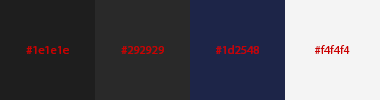
<style>
.page{position:relative;width:380px;height:100px;background:#1e1e1e}
.page>*{position:absolute;margin:0}
.t1{font:12px "MyriadPro-Regular";color:#cc0000}
</style>
<div class="page">
<p class="t1" style="left:26px;top:46px;width:43px;height:8px">#1e1e1e</p>
<p class="t1" style="left:121px;top:46px;width:43px;height:8px">#292929</p>
<p class="t1" style="left:216px;top:45px;width:43px;height:9px">#1d2548</p>
<p class="t1" style="left:315px;top:45px;width:35px;height:9px">#f4f4f4</p>
</div>
